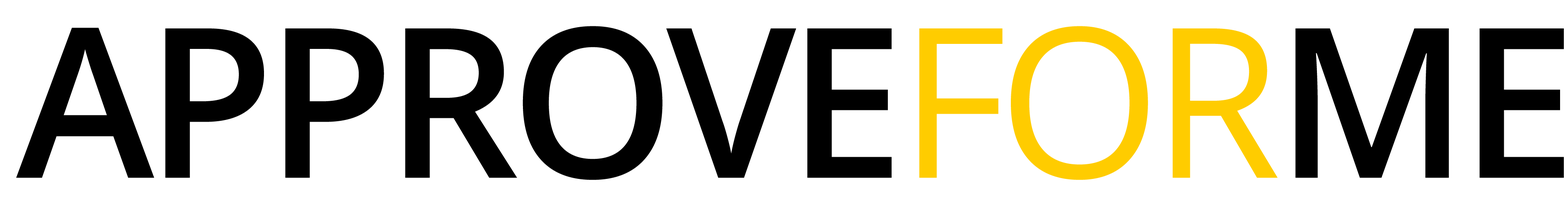
<style>
.page{position:relative;width:1568px;height:209px;background:#ffffff}
.page>*{position:absolute;margin:0}
.t1{font:208.5px "OpenSans-Semibold";letter-spacing:-0.04em;color:#000000}
.t2{font:208.5px "OpenSans-Semibold";letter-spacing:-0.025em;color:#000000}
.t3{font:208.5px "OpenSans";letter-spacing:-0.04em;color:#ffcc00}
.t4{font:208.5px "OpenSans";letter-spacing:-0.025em;color:#ffcc00}
</style>
<div class="page">
<p class="t1" style="left:16px;top:26px;width:1548px;height:154px">APPROV<span class="t2">E</span><span class="t3">FO</span><span class="t4">R</span>ME</p>
</div>
